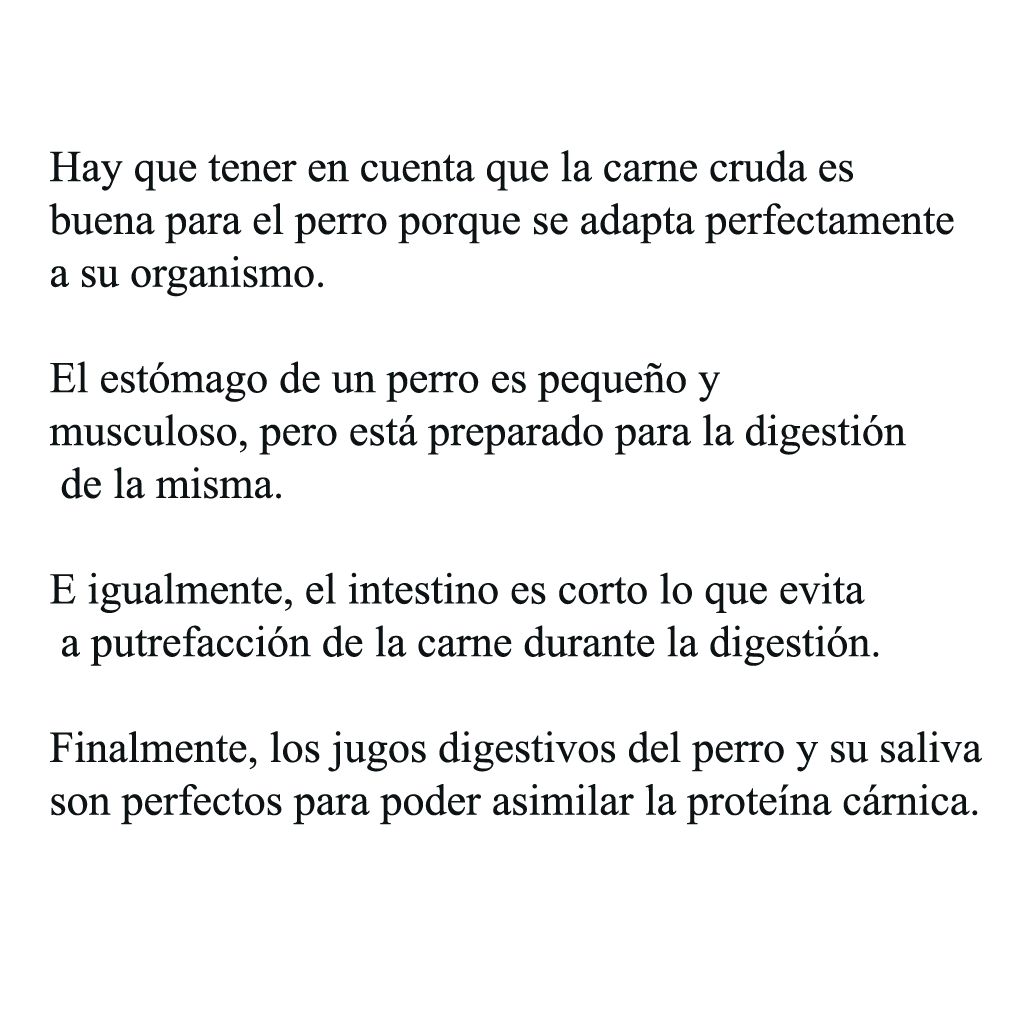
<style>
.page{position:relative;width:1024px;height:1024px;background:#ffffff}
.page>*{position:absolute;margin:0}
.t1{font:44px "TimesNewRomanPSMT";color:#0d1314}
</style>
<div class="page">
<p class="t1" style="left:49px;top:150px;width:933px;height:675px">Hay que tener en cuenta que la carne cruda es <br>buena para el perro porque se adapta perfectamente <br>a su organismo. <br><br>El estómago de un perro es pequeño y <br>musculoso, pero está preparado para la digestión<br> de la misma. <br><br>E igualmente, el intestino es corto lo que evita<br> a putrefacción de la carne durante la digestión. <br><br>Finalmente, los jugos digestivos del perro y su saliva <br>son perfectos para poder asimilar la proteína cárnica.</p>
</div>
